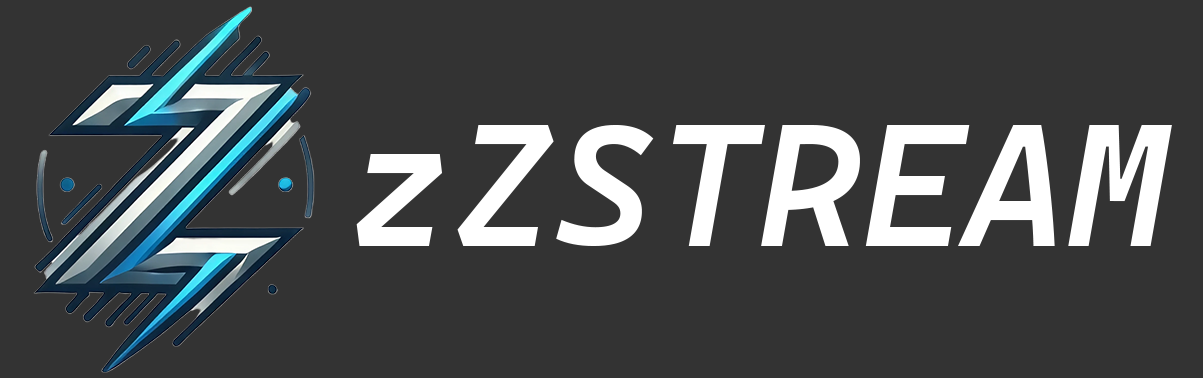
<style>
.page{position:relative;width:1203px;height:378px;background:#333333}
.page>*{position:absolute;margin:0}
.t1{font:175px "CascadiaCode-SemiBoldItalic";color:#ffffff}
</style>
<div class="page">
<p class="t1" style="left:356px;top:125px;width:816px;height:121px">zZSTREAM</p>
</div>
